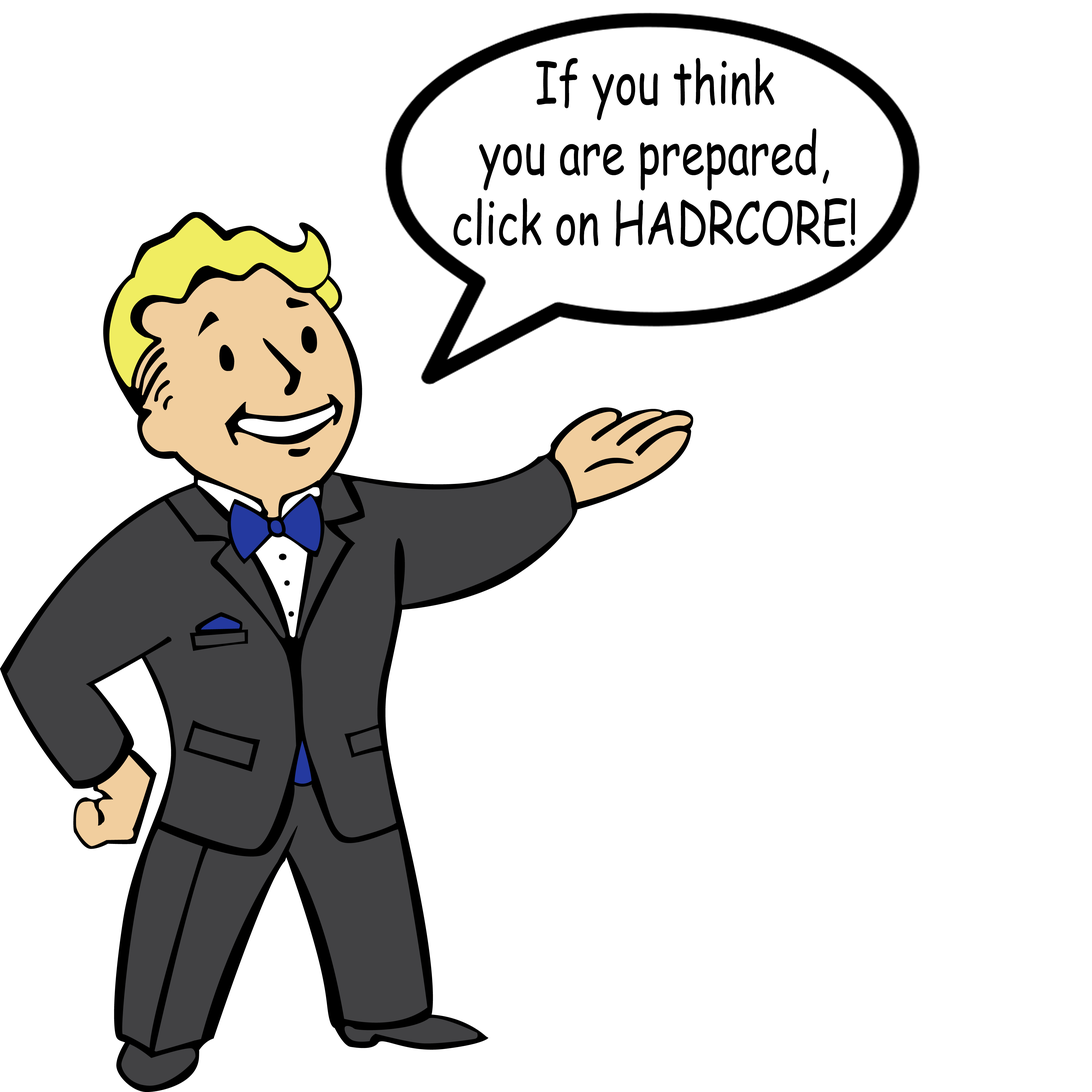
<style>
.page{position:relative;width:1092px;height:1092px;background:#ffffff}
.page>*{position:absolute;margin:0}
.t1{font:58.5px "ComicSansMS";color:#000000;scale:0.73 1}
</style>
<div class="page">
<p class="t1" style="left:453px;top:58px;width:402px;height:189px;text-align:center">If you think<br> you are prepared,<br> click on HADRCORE!</p>
</div>
